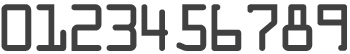
<style>
.page{position:relative;width:350px;height:54px;background:#ffffff}
.page>*{position:absolute;margin:0}
.t1{font:72px "DataControl";color:#404040}
</style>
<div class="page">
<p class="t1" style="left:1px;top:4px;width:346px;height:47px">0123456789</p>
</div>
